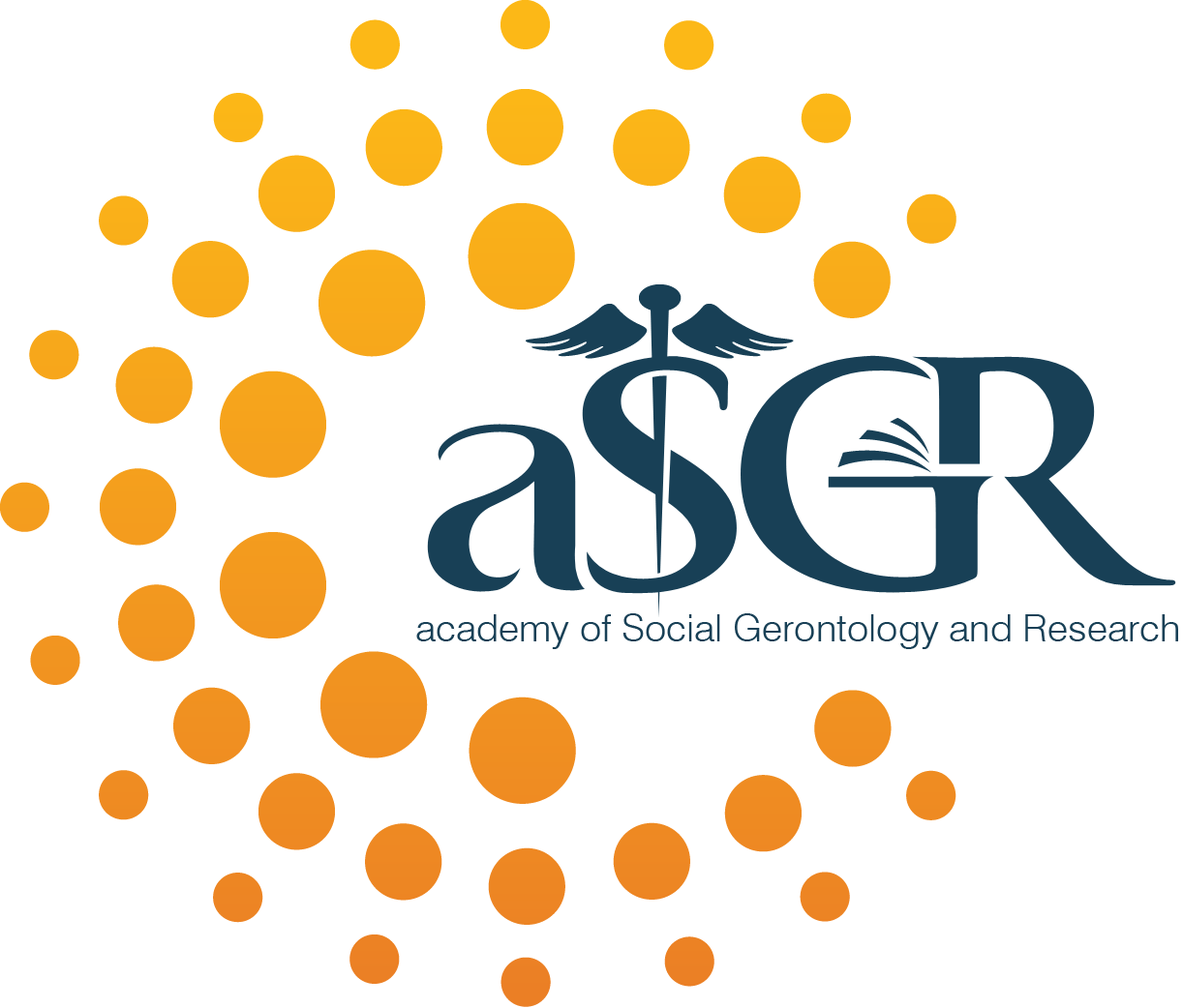
<style>
.page{position:relative;width:1183px;height:1008px;background:#ffffff}
.page>*{position:absolute;margin:0}
.t1{font:37.3px "Swiss721BT-Light";color:#184056;scale:1.03 1}
</style>
<div class="page">
<p class="t1" style="left:416px;top:614px;width:762px;height:35px">academy of Social Gerontology and Research</p>
</div>
